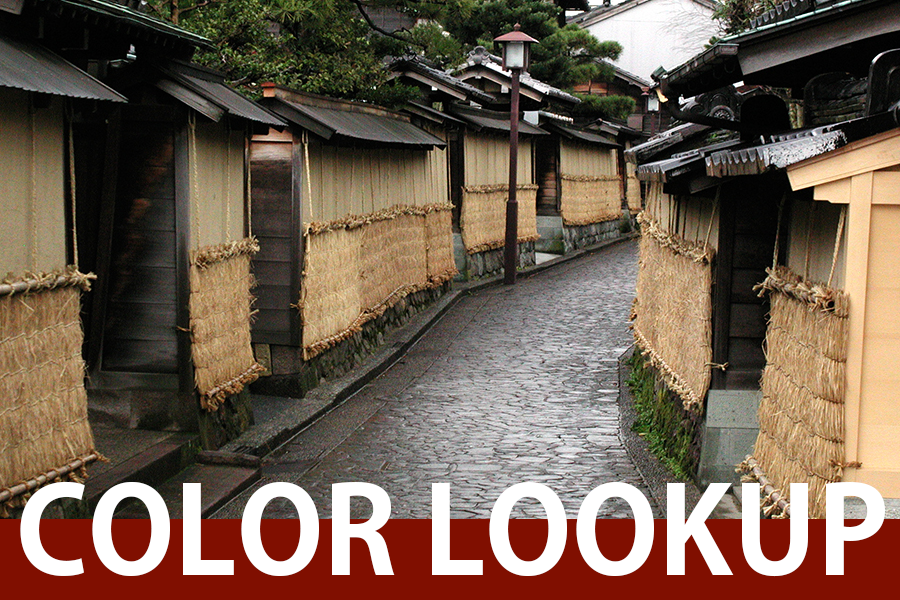
<style>
.page{position:relative;width:900px;height:600px}
.page>*{position:absolute;margin:0}
.t1{font:120px "KozGoPr6N-Bold";color:#ffffff}
</style>
<div class="page">
<p class="t1" style="left:20px;top:481px;width:865px;height:96px">COLOR LOOKUP</p>
</div>
